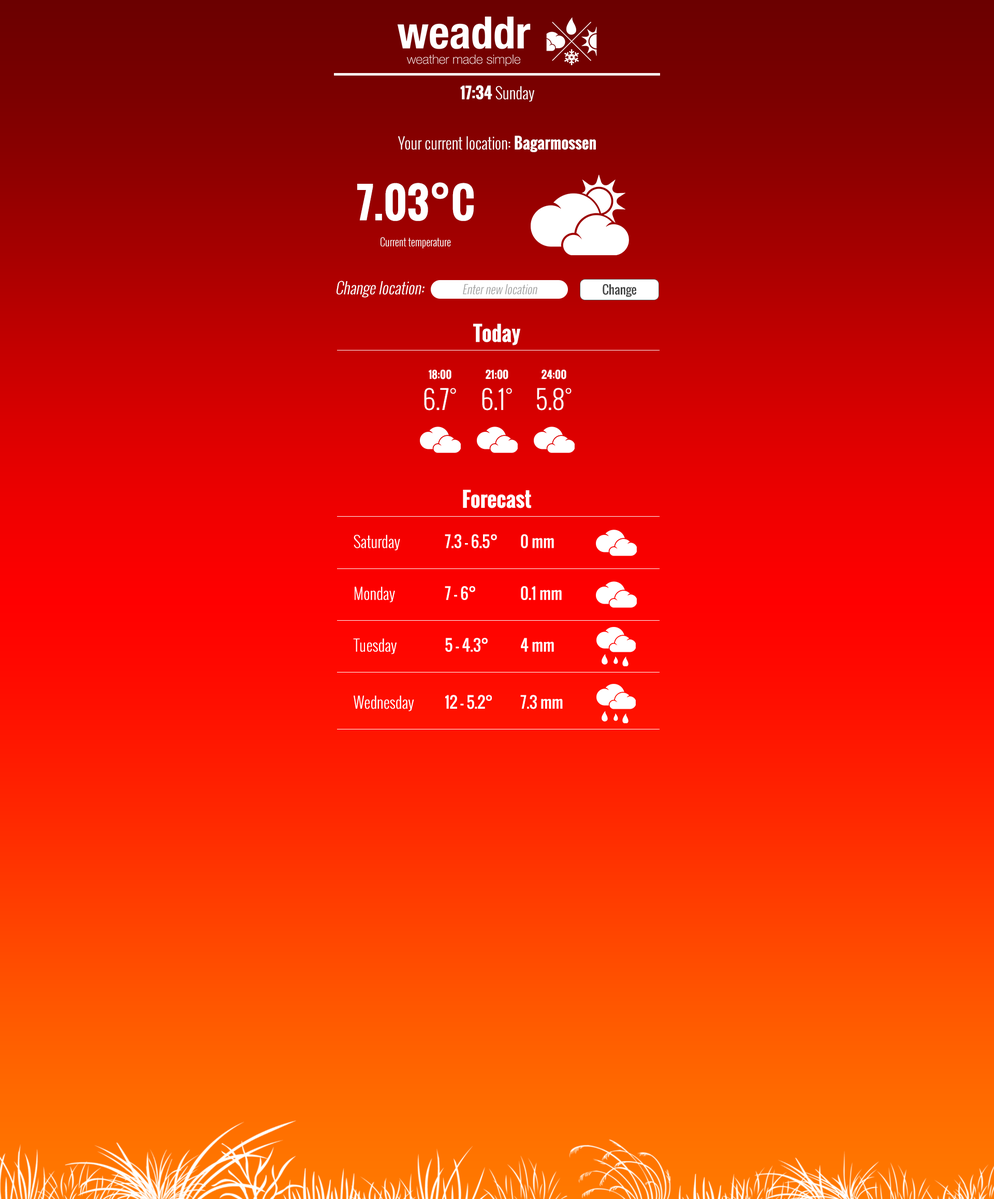
<style>
.page{position:relative;width:994px;height:1199px}
.page>*{position:absolute;margin:0}
.t1{font:15.5px "Oswald-Light";color:#ffffff}
.t2{font:15.5px "Oswald-Bold";color:#ffffff}
.t3{font:15.6px "Oswald-Light";color:#ffffff}
.t4{font:15.6px "Oswald-Bold";color:#ffffff}
.t5{font:41.6px "Oswald-Bold";color:#ffffff}
.t6{font:10.6px "Oswald-Light";color:#ffffff}
.t7{font:15.5px "Oswald-Light";color:#ffffff;font-style:italic}
.t8{font:11.9px "Oswald-Light";color:#9f9f9f;font-style:italic}
.t9{font:11.9px "Oswald-Regular";color:#444444}
.t10{font:20.7px "Oswald-Bold";color:#ffffff}
.t11{font:10.4px/17.1px "Oswald-Bold";color:#ffffff}
.t12{font:25.9px "Oswald-Light";color:#ffffff}
.t13{font:15.6px "Oswald-Regular";color:#ffffff}
</style>
<div class="page">
<p class="t1" style="left:460px;top:85px;width:74px;height:17px"><span class="t2">17:34 </span>Sunday</p>
<p class="t3" style="left:398px;top:136px;width:198px;height:16px">Your current location: <span class="t4">Bagarmossen</span></p>
<p class="t5" style="left:357px;top:182px;width:117px;height:39px">7.03°C</p>
<p class="t6" style="left:381px;top:237px;width:70px;height:12px">Current temperature</p>
<p class="t7" style="left:337px;top:281px;width:88px;height:17px">Change location:</p>
<p class="t8" style="left:463px;top:284px;width:75px;height:11px">Enter new location</p>
<p class="t9" style="left:603px;top:284px;width:33px;height:13px">Change</p>
<p class="t10" style="left:473px;top:324px;width:47px;height:21px">Today</p>
<p class="t11" style="left:424px;top:370px;width:32px;height:41px;text-align:center">18:00<br><span class="t12">6.7°</span></p>
<p class="t11" style="left:482px;top:370px;width:30px;height:41px;text-align:center">21:00<br><span class="t12">6.1°</span></p>
<p class="t11" style="left:537px;top:370px;width:35px;height:41px;text-align:center">24:00<br><span class="t12">5.8°</span></p>
<p class="t10" style="left:463px;top:490px;width:68px;height:19px">Forecast</p>
<p class="t3" style="left:354px;top:535px;width:46px;height:15px">Saturday</p>
<p class="t13" style="left:445px;top:534px;width:52px;height:14px">7.3 - 6.5°</p>
<p class="t13" style="left:521px;top:534px;width:33px;height:14px">0 mm</p>
<p class="t3" style="left:355px;top:587px;width:40px;height:16px">Monday</p>
<p class="t13" style="left:445px;top:586px;width:30px;height:14px">7 - 6°</p>
<p class="t13" style="left:521px;top:586px;width:41px;height:14px">0.1 mm</p>
<p class="t3" style="left:353px;top:638px;width:44px;height:17px">Tuesday</p>
<p class="t13" style="left:445px;top:638px;width:43px;height:14px">5 - 4.3°</p>
<p class="t13" style="left:521px;top:638px;width:33px;height:14px">4 mm</p>
<p class="t3" style="left:354px;top:695px;width:60px;height:17px">Wednesday</p>
<p class="t13" style="left:445px;top:695px;width:47px;height:14px">12 - 5.2°</p>
<p class="t13" style="left:520px;top:695px;width:43px;height:14px">7.3 mm</p>
</div>
